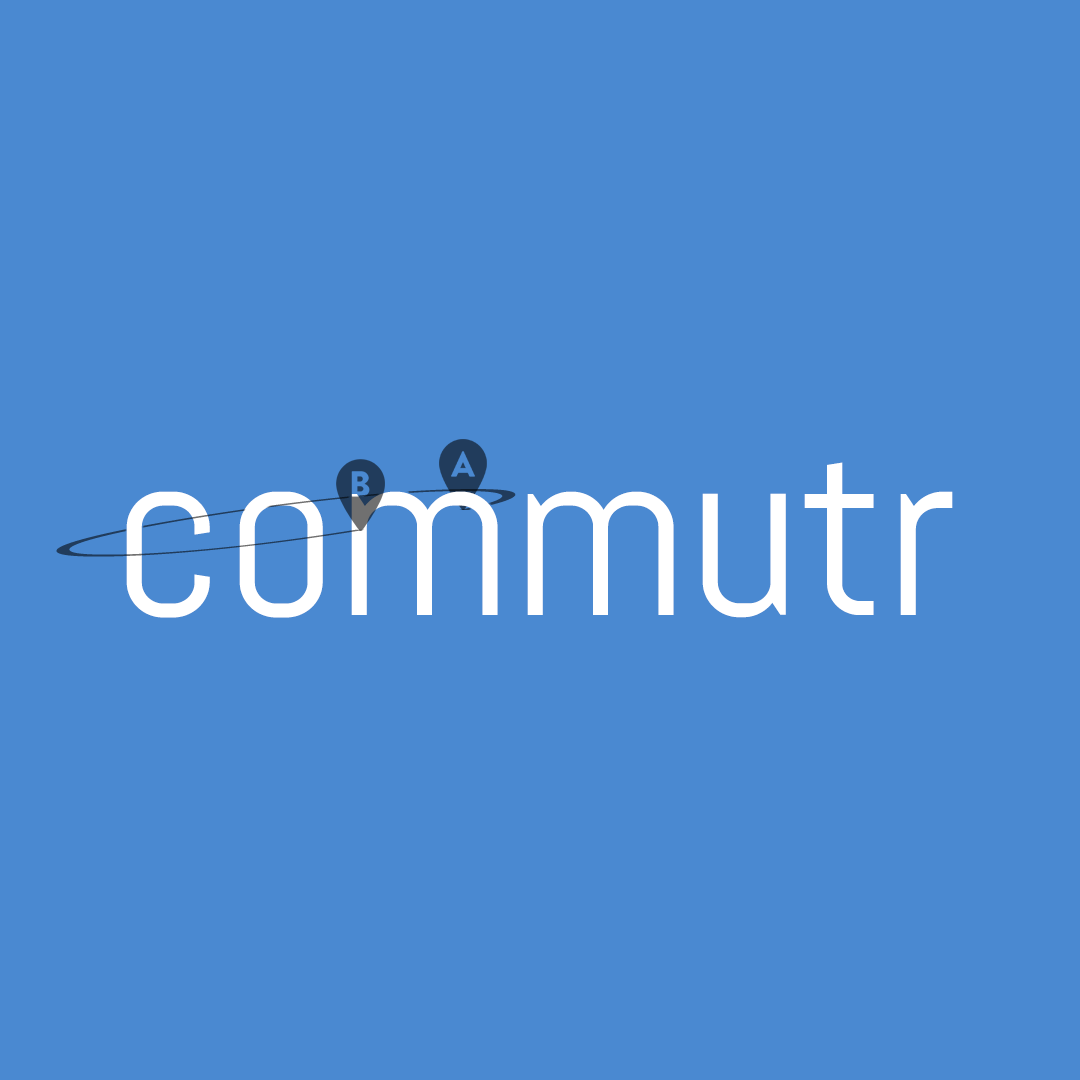
<style>
.page{position:relative;width:1080px;height:1080px;background:#4a89d1}
.page>*{position:absolute;margin:0}
.t1{font:241.8px "Abel-Regular";color:#ffffff}
.t2{font:241.8px "5thGradeCursive";color:#ffffff}
</style>
<div class="page">
<p class="t1" style="left:126px;top:462px;width:827px;height:156px"><span class="t2"><br></span>commutr</p>
</div>
